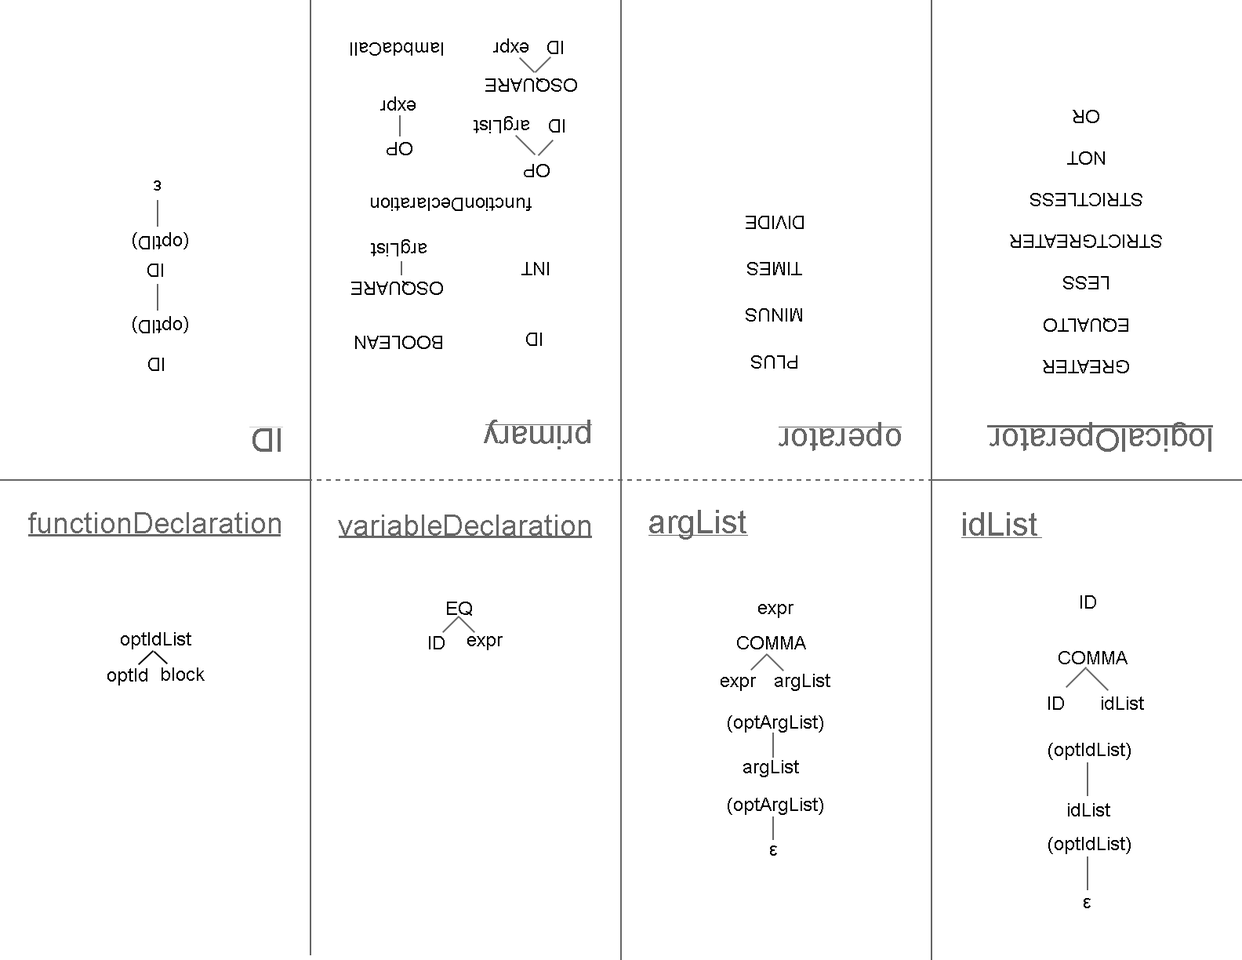
<style>
.page{position:relative;width:1242px;height:960px;background:#ffffff}
.page>*{position:absolute;margin:0}
.t1{font:9.4px "ArialMT";color:#000000}
.t2{font:32.9px "ArialMT";color:#666666}
.t3{font:33px "ArialMT";color:#666666}
.t4{font:29.8px "ArialMT";color:#666666}
</style>
<div class="page">
<p class="t1" style="left:493px;top:38px;width:36px;height:15px;rotate:180deg">expr</p>
<p class="t1" style="left:547px;top:41px;width:16px;height:13px;rotate:180deg">ID</p>
<p class="t1" style="left:351px;top:42px;width:92px;height:14px;rotate:180deg">lambdaCall</p>
<p class="t1" style="left:485px;top:78px;width:92px;height:14px;rotate:180deg">OSQUARE</p>
<p class="t1" style="left:380px;top:96px;width:36px;height:15px;rotate:180deg">expr</p>
<p class="t1" style="left:1073px;top:110px;width:27px;height:13px;rotate:180deg">OR</p>
<p class="t1" style="left:474px;top:116px;width:55px;height:17px;rotate:180deg">argList</p>
<p class="t1" style="left:549px;top:119px;width:16px;height:14px;rotate:180deg">ID</p>
<p class="t1" style="left:387px;top:142px;width:26px;height:13px;rotate:180deg">OP</p>
<p class="t1" style="left:1067px;top:151px;width:38px;height:14px;rotate:180deg">NOT</p>
<p class="t1" style="left:524px;top:164px;width:26px;height:13px;rotate:180deg">OP</p>
<p class="t1" style="left:154px;top:180px;width:7px;height:11px;rotate:180deg">ε</p>
<p class="t1" style="left:371px;top:198px;width:161px;height:13px;rotate:180deg">functionDeclaration</p>
<p class="t1" style="left:1030px;top:193px;width:113px;height:13px;rotate:180deg">STRICTLESS</p>
<p class="t1" style="left:746px;top:216px;width:58px;height:13px;rotate:180deg">DIVIDE</p>
<p class="t1" style="left:133px;top:232px;width:55px;height:17px;rotate:180deg">(optID)</p>
<p class="t1" style="left:371px;top:239px;width:56px;height:17px;rotate:180deg">argList</p>
<p class="t1" style="left:1010px;top:234px;width:152px;height:14px;rotate:180deg">STRICTGREATER</p>
<p class="t1" style="left:147px;top:264px;width:16px;height:13px;rotate:180deg">ID</p>
<p class="t1" style="left:522px;top:262px;width:27px;height:13px;rotate:180deg">INT</p>
<p class="t1" style="left:747px;top:262px;width:55px;height:13px;rotate:180deg">TIMES</p>
<p class="t1" style="left:351px;top:281px;width:92px;height:14px;rotate:180deg">OSQUARE</p>
<p class="t1" style="left:1063px;top:276px;width:46px;height:13px;rotate:180deg">LESS</p>
<p class="t1" style="left:133px;top:316px;width:55px;height:17px;rotate:180deg">(optID)</p>
<p class="t1" style="left:746px;top:308px;width:56px;height:14px;rotate:180deg">MINUS</p>
<p class="t1" style="left:1044px;top:318px;width:85px;height:14px;rotate:180deg">EQUALTO</p>
<p class="t1" style="left:355px;top:336px;width:87px;height:13px;rotate:180deg">BOOLEAN</p>
<p class="t1" style="left:526px;top:333px;width:16px;height:13px;rotate:180deg">ID</p>
<p class="t1" style="left:148px;top:358px;width:16px;height:13px;rotate:180deg">ID</p>
<p class="t1" style="left:751px;top:355px;width:47px;height:14px;rotate:180deg">PLUS</p>
<p class="t1" style="left:1043px;top:360px;width:86px;height:13px;rotate:180deg">GREATER</p>
<p class="t2" style="left:484px;top:420px;width:107px;height:29px;rotate:180deg">primary</p>
<p class="t3" style="left:779px;top:422px;width:122px;height:29px;rotate:180deg">operator</p>
<p class="t2" style="left:990px;top:422px;width:222px;height:30px;rotate:180deg">logicalOperator</p>
<p class="t2" style="left:253px;top:428px;width:28px;height:24px;rotate:180deg">ID</p>
<p class="t2" style="left:649px;top:510px;width:98px;height:30px">argList</p>
<p class="t4" style="left:28px;top:512px;width:253px;height:21px">functionDeclaration</p>
<p class="t4" style="left:338px;top:514px;width:253px;height:22px">variableDeclaration</p>
<p class="t2" style="left:963px;top:512px;width:75px;height:24px">idList</p>
<p class="t1" style="left:447px;top:602px;width:25px;height:14px">EQ</p>
<p class="t1" style="left:758px;top:604px;width:36px;height:14px">expr</p>
<p class="t1" style="left:1081px;top:595px;width:15px;height:14px">ID</p>
<p class="t1" style="left:121px;top:632px;width:70px;height:17px">optIdList</p>
<p class="t1" style="left:429px;top:636px;width:16px;height:13px">ID</p>
<p class="t1" style="left:467px;top:636px;width:36px;height:14px">expr</p>
<p class="t1" style="left:737px;top:636px;width:69px;height:13px">COMMA</p>
<p class="t1" style="left:1059px;top:651px;width:69px;height:13px">COMMA</p>
<p class="t1" style="left:107px;top:668px;width:40px;height:17px">optId</p>
<p class="t1" style="left:162px;top:667px;width:43px;height:14px">block</p>
<p class="t1" style="left:721px;top:677px;width:35px;height:14px">expr</p>
<p class="t1" style="left:775px;top:674px;width:56px;height:17px">argList</p>
<p class="t1" style="left:1049px;top:696px;width:15px;height:14px">ID</p>
<p class="t1" style="left:1102px;top:696px;width:42px;height:14px">idList</p>
<p class="t1" style="left:728px;top:715px;width:95px;height:17px">(optArgList)</p>
<p class="t1" style="left:1049px;top:743px;width:82px;height:17px">(optIdList)</p>
<p class="t1" style="left:743px;top:760px;width:56px;height:17px">argList</p>
<p class="t1" style="left:728px;top:798px;width:95px;height:17px">(optArgList)</p>
<p class="t1" style="left:1068px;top:803px;width:42px;height:13px">idList</p>
<p class="t1" style="left:770px;top:845px;width:7px;height:11px">ε</p>
<p class="t1" style="left:1049px;top:837px;width:82px;height:17px">(optIdList)</p>
<p class="t1" style="left:1084px;top:898px;width:7px;height:10px">ε</p>
</div>
